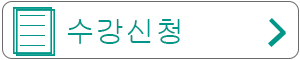
<style>
.page{position:relative;width:300px;height:60px;background:#ffffff}
.page>*{position:absolute;margin:0}
.t1{font:30px "New-Gulim";color:#009688}
</style>
<div class="page">
<p class="t1" style="left:67px;top:19px;width:113px;height:25px">수강신청</p>
</div>
